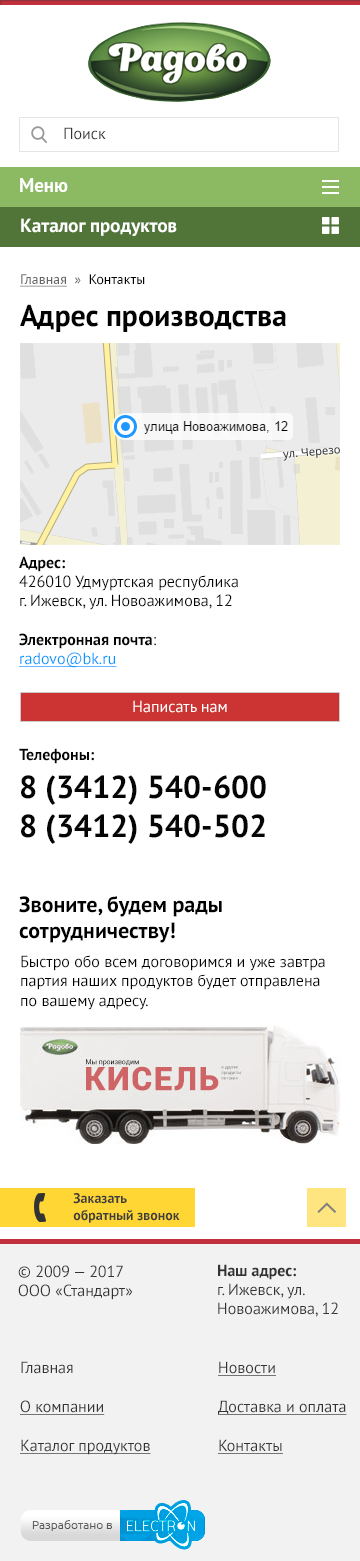
<style>
.page{position:relative;width:360px;height:1561px;background:#ffffff}
.page>*{position:absolute;margin:0}
.t1{font:16px "PTSans-Regular";color:#333333}
.t2{font:19px "PTSans-Bold";color:#ffffff}
.t3{font:14px "PTSans-Regular";color:#000000}
.t4{font:14px "PTSans-Regular";color:#666666;text-decoration:underline}
.t5{font:14px "PTSans-Regular";color:#666666}
.t6{font:30px "PTSans-Bold";color:#010101}
.t7{font:16px "PTSans-Regular";color:#050505}
.t8{font:16px "PTSans-Bold";color:#050505}
.t9{font:16px "PTSans-Regular";color:#0099ff;text-decoration:underline}
.t10{font:32px "PTSans-Bold";color:#050505}
.t11{font:16px "PTSans-Regular";color:#ffffff}
.t12{font:22px "PTSans-Bold";color:#000000}
.t13{font:16px "PTSans-Regular";color:#000000}
.t14{font:14px "PTSans-Bold";color:#3e3e3e}
.t15{font:16px "PTSans-Bold";color:#333333}
.t16{font:16px/39px "PTSans-Regular";color:#333333;text-decoration:underline}
.t17{font:16px/39px "PTSans-Regular";color:#333333}
</style>
<div class="page">
<p class="t1" style="left:64px;top:127px;width:42px;height:13px">Поиск</p>
<p class="t2" style="left:20px;top:178px;width:48px;height:14px">Меню</p>
<p class="t2" style="left:21px;top:218px;width:156px;height:18px">Каталог продуктов</p>
<p class="t3" style="left:20px;top:274px;width:125px;height:13px"><span class="t4">Главная</span><span class="t5">  »  </span>Контакты</p>
<p class="t6" style="left:20px;top:304px;width:266px;height:28px">Адрес производства</p>
<p class="t7" style="left:19px;top:556px;width:247px;height:288px"><span class="t8">Адрес:<br></span>426010 Удмуртская республика<br>г. Ижевск, ул. Новоажимова, 12<br><br><span class="t8">Электронная почта</span>:<br><span class="t9">radovo@bk.ru<br><br></span><span class="t8"><br><br><br>Телефоны:<br></span><span class="t10">8 (3412) 540-600<br>8 (3412) 540-502</span></p>
<p class="t11" style="left:133px;top:700px;width:94px;height:13px">Написать нам</p>
<p class="t12" style="left:19px;top:896px;width:203px;height:47px">Звоните, будем рады <br>сотрудничеству!</p>
<p class="t13" style="left:21px;top:955px;width:304px;height:55px">Быстро обо всем договоримся и уже завтра партия наших продуктов будет отправлена по вашему адресу.</p>
<p class="t14" style="left:73px;top:1193px;width:107px;height:30px">Заказать <br>обратный звонок</p>
<p class="t1" style="left:18px;top:1265px;width:115px;height:35px">© 2009 — 2017<br>ООО «Стандарт»</p>
<p class="t1" style="left:218px;top:1264px;width:120px;height:53px"><span class="t15">Наш адрес:<br></span>г. Ижевск, ул. <br>Новоажимова, 12</p>
<p class="t16" style="left:20px;top:1361px;width:131px;height:94px"><span class="t17">Главная<br></span>О компании<br>Каталог продуктов</p>
<p class="t16" style="left:218px;top:1361px;width:129px;height:93px">Новости<br>Доставка и оплата<br>Контакты</p>
</div>
